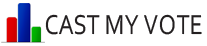
<style>
.page{position:relative;width:207px;height:46px;background:#ffffff}
.page>*{position:absolute;margin:0}
.t1{font:28.8px "Corbel";color:#231f20;text-transform:uppercase;scale:0.83 1}
</style>
<div class="page">
<p class="t1" style="left:45px;top:14px;width:157px;height:21px">Cast My Vote</p>
</div>
